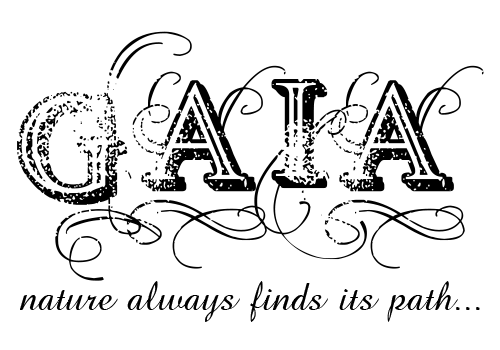
<style>
.page{position:relative;width:500px;height:350px;background:#ffffff}
.page>*{position:absolute;margin:0}
.t1{font:200px "VtksSimplexBeauty2";color:#000000}
.t2{font:41.7px "Precious";color:#000000}
</style>
<div class="page">
<p class="t1" style="left:17px;top:31px;width:467px;height:250px">gaia</p>
<p class="t2" style="left:20px;top:281px;width:460px;height:41px">nature always finds its path...</p>
</div>
